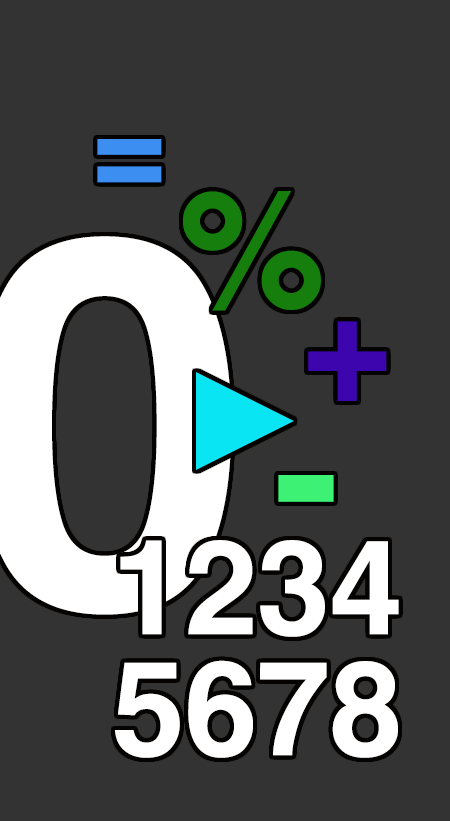
<style>
.page{position:relative;width:450px;height:821px;background:#333333}
.page>*{position:absolute;margin:0}
.t1{font:120px "Helvetica-Bold";letter-spacing:-0.006em;color:#3c8ff1}
.t2{font:164.2px "Helvetica-Bold";letter-spacing:-0.006em;color:#157e0d}
.t3{font:149.8px "Helvetica-Bold";letter-spacing:-0.006em;color:#3d05ad}
.t4{font:200.7px "Helvetica-Bold";letter-spacing:-0.006em;color:#3cf173}
.t5{font:132px/24.2px "Helvetica-Bold";letter-spacing:-0.006em;color:#ffffff}
</style>
<div class="page">
<p class="t1" style="left:97px;top:139px;width:65px;height:44px">=</p>
<p class="t2" style="left:183px;top:191px;width:138px;height:120px">%</p>
<p class="t3" style="left:308px;top:321px;width:79px;height:80px">+</p>
<p class="t4" style="left:278px;top:475px;width:56px;height:27px">-</p>
<p class="t5" style="left:115px;top:540px;width:284px;height:218px">1234<br><br><br><br><br>5678</p>
</div>
